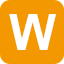
<style>
.page{position:relative;width:64px;height:64px;background:#f39800}
.page>*{position:absolute;margin:0}
.t1{font:50px "Arial-BoldMT";color:#ffffff}
</style>
<div class="page">
<p class="t1" style="left:9px;top:14px;width:47px;height:36px">W</p>
</div>
